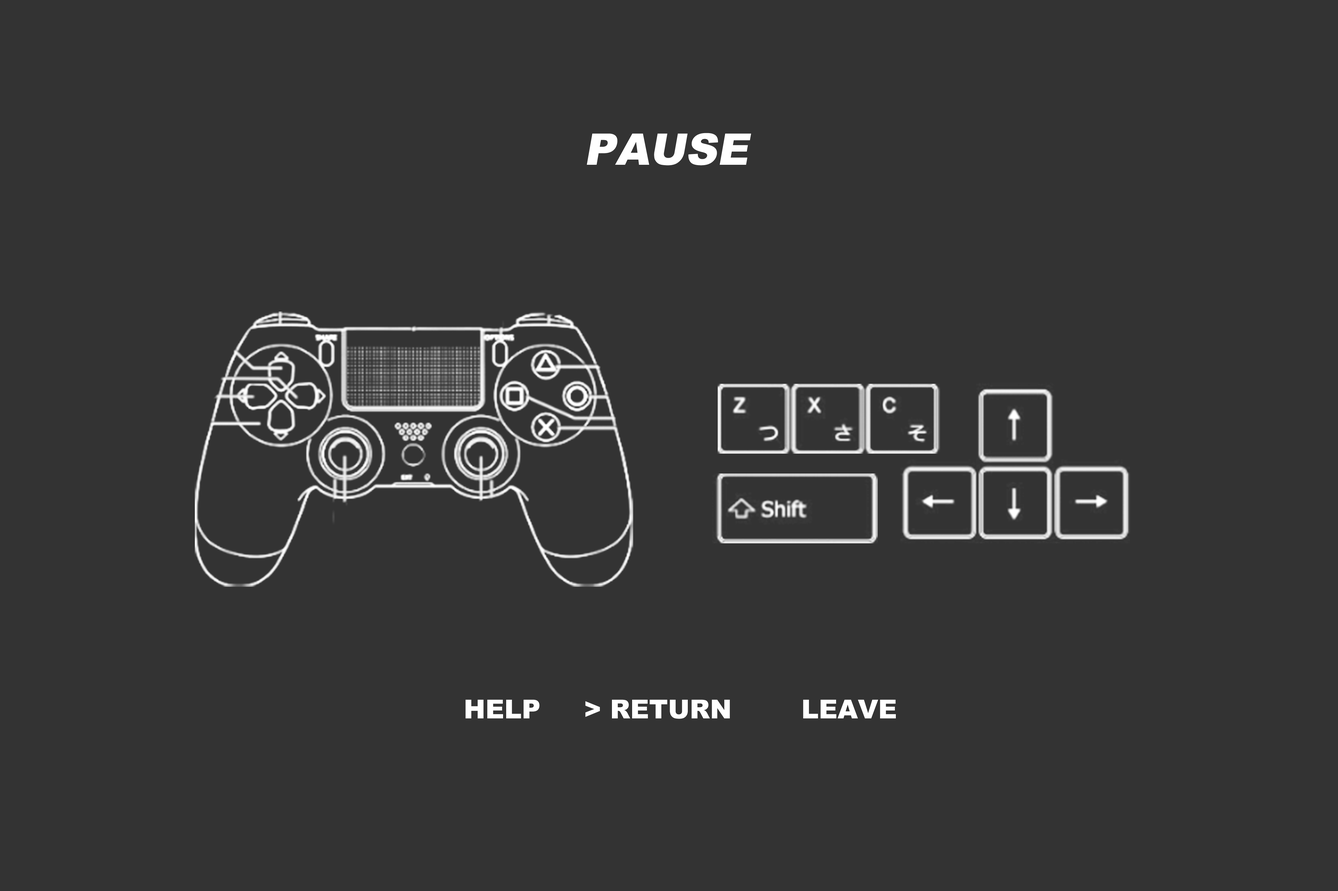
<style>
.page{position:relative;width:1338px;height:891px;background:#333333}
.page>*{position:absolute;margin:0}
.t1{font:43.5px "Arial-Black";color:#ffffff;font-style:italic}
.t2{font:26.1px "Arial-Black";color:#ffffff}
</style>
<div class="page">
<p class="t1" style="left:586px;top:133px;width:165px;height:33px">PAUSE</p>
<p class="t2" style="left:465px;top:700px;width:431px;height:19px">HELP     &gt; RETURN        LEAVE</p>
</div>
